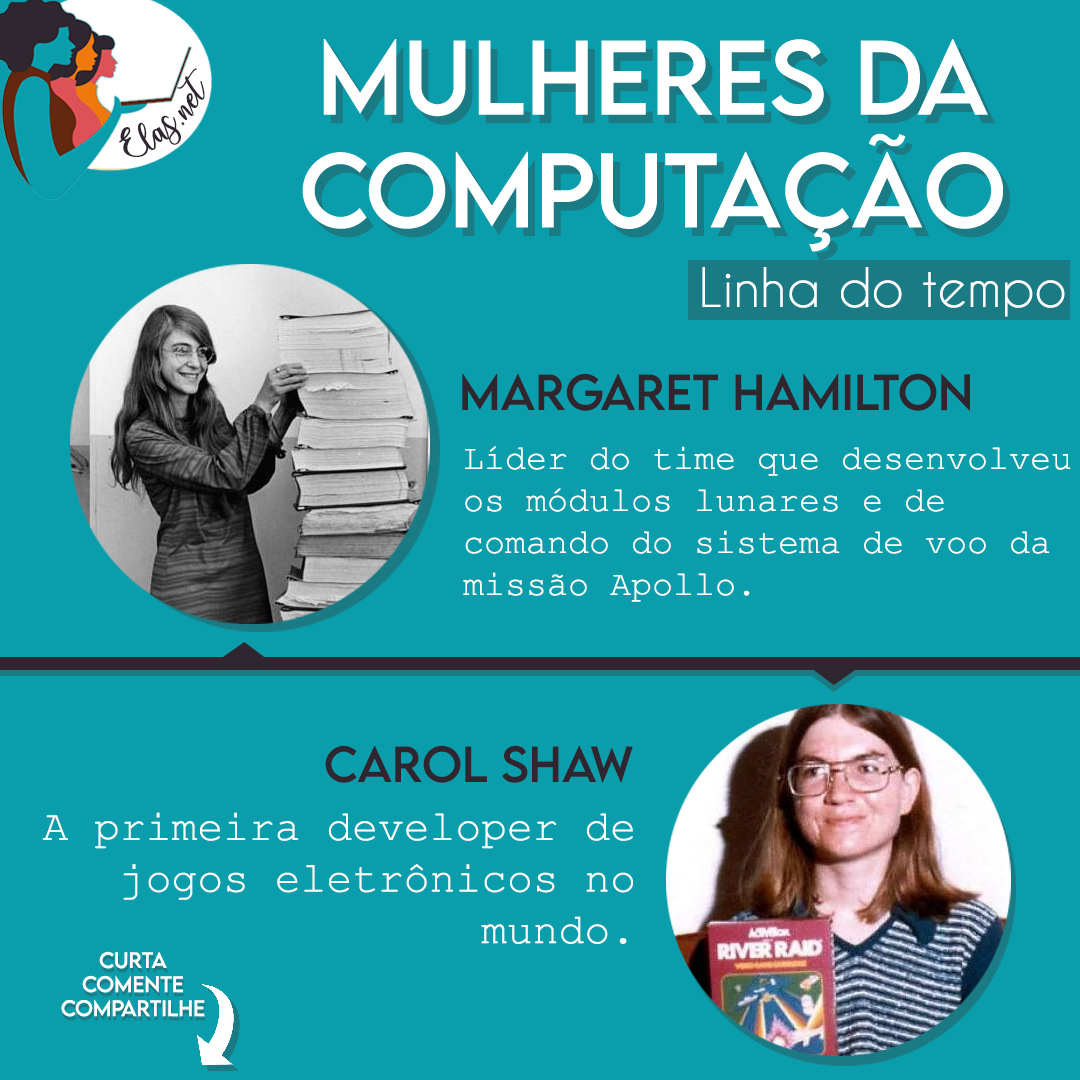
<style>
.page{position:relative;width:1080px;height:1080px;background:#0a9eac}
.page>*{position:absolute;margin:0}
.t1{font:25px "charlinda-Regular";color:#2f262f;scale:1.18 1}
.t2{font:51px "CaviarDreams";color:#ffffff}
.t3{font:45px "LEMONMILK-Regular";color:#2f262f}
.t4{font:35px "CourierNewPSMT";color:#ffffff}
.t5{font:43px "CourierNewPSMT";color:#ffffff}
.t6{font:20px "LEMONMILK-Regular";color:#ffffff}
</style>
<div class="page">
<p class="t1" style="left:119px;top:68px;width:86px;height:89px;rotate:-43deg">Elas.net</p>
<p class="t2" style="left:702px;top:267px;width:363px;height:50px">Linha do tempo</p>
<p class="t3" style="left:462px;top:373px;width:508px;height:38px">Margaret Hamilton</p>
<p class="t4" style="left:463px;top:446px;width:608px;height:156px">Líder do time que desenvolveu<br>os módulos lunares e de <br>comando do sistema de voo da <br>missão Apollo.</p>
<p class="t3" style="left:325px;top:745px;width:308px;height:38px">Carol Shaw</p>
<p class="t5" style="left:42px;top:812px;width:591px;height:132px;text-align:right">A primeira developer de<br>jogos eletrônicos no<br>mundo.</p>
<p class="t6" style="left:61px;top:951px;width:144px;height:66px;text-align:center">Curta<br>Comente<br>Compartilhe</p>
</div>
